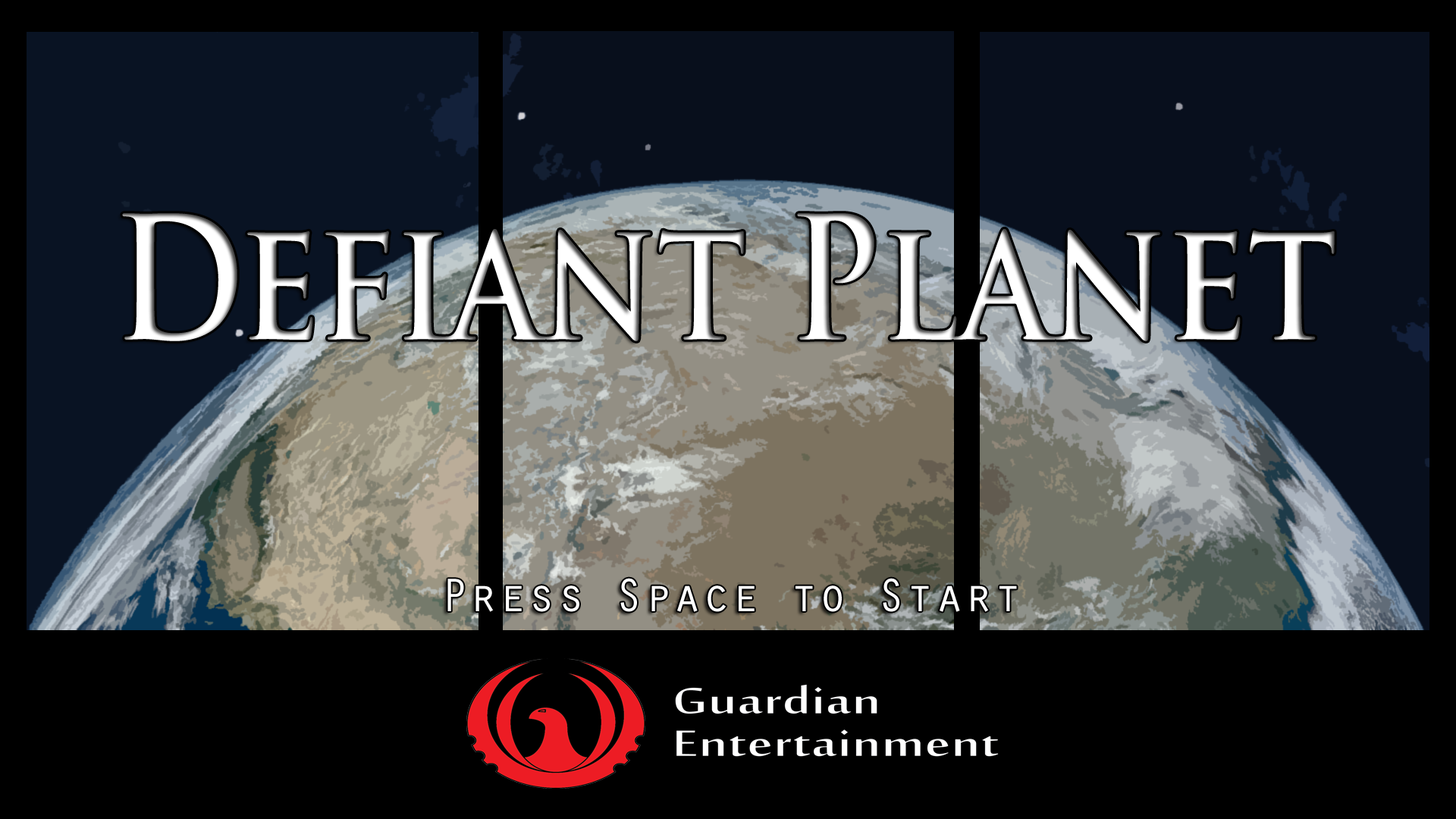
<style>
.page{position:relative;width:1456px;height:819px;background:#000000}
.page>*{position:absolute;margin:0}
.t1{font:166.8px "TrajanPro-Bold";color:#ffffff;scale:0.84 1}
.t2{font:48.5px "OratorStd";color:#ffffff}
</style>
<div class="page">
<p class="t1" style="left:122px;top:213px;width:1213px;height:128px">Defiant Planet</p>
<p class="t2" style="left:447px;top:578px;width:570px;height:34px">Press Space to Start</p>
</div>
